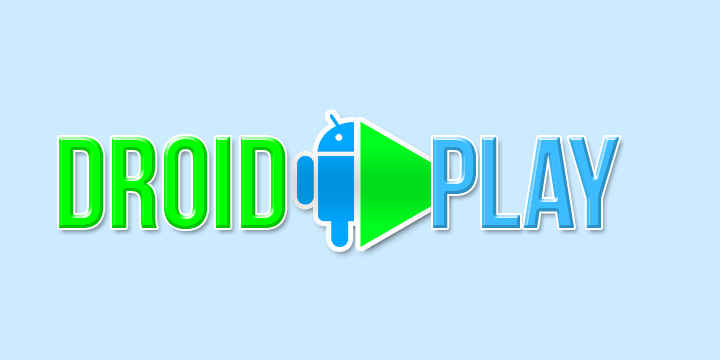
<style>
.page{position:relative;width:720px;height:360px;background:#ccebff}
.page>*{position:absolute;margin:0}
.t1{font:130.3px "BebasNeue";color:#00ff00}
.t2{font:130.3px "BebasNeue";color:#3bbcff}
</style>
<div class="page">
<p class="t1" style="left:59px;top:136px;width:227px;height:93px">Droid</p>
<p class="t2" style="left:433px;top:137px;width:187px;height:91px">Play</p>
</div>
